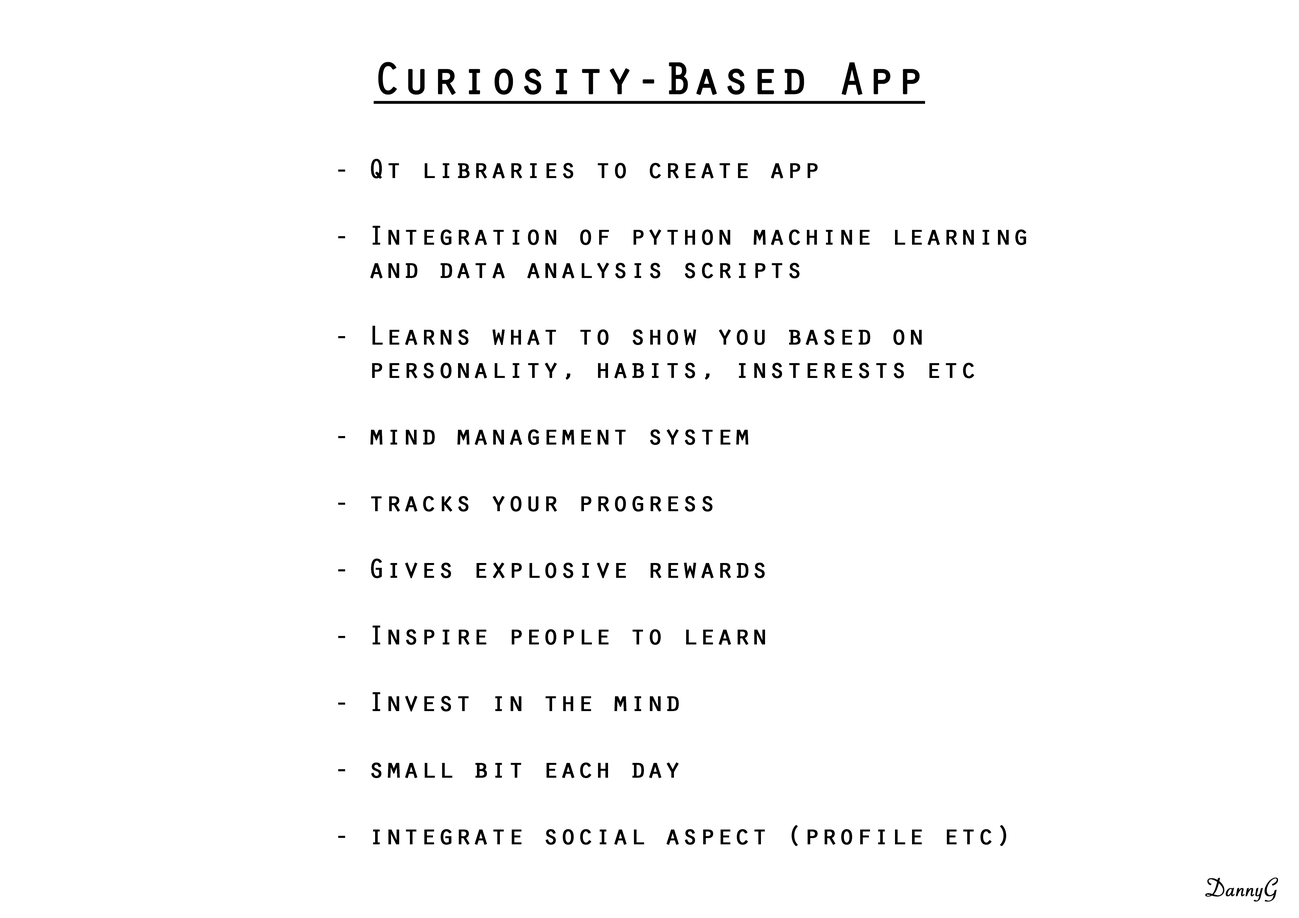
<style>
.page{position:relative;width:1299px;height:918px;background:#ffffff}
.page>*{position:absolute;margin:0}
.t1{font:46.3px "OratorStd";color:#000000;font-weight:bold;text-decoration:underline}
.t2{font:27.8px "OratorStd";color:#000000;font-weight:bold}
.t3{font:27.8px "SavoyeLetPlain";color:#000000;font-weight:bold}
</style>
<div class="page">
<p class="t1" style="left:374px;top:62px;width:551px;height:42px">Curiosity-Based App</p>
<p class="t2" style="left:338px;top:159px;width:688px;height:687px">- Qt libraries to create app<br><br>- Integration of python machine learning <br>  and data analysis scripts<br><br>- Learns what to show you based on <br>  personality, habits, insterests etc<br><br>- mind management system<br><br>- tracks your progress<br><br>- Gives explosive rewards<br><br>- Inspire people to learn<br><br>- Invest in the mind<br><br>- small bit each day<br><br>- integrate social aspect (profile etc)</p>
<p class="t3" style="left:1205px;top:877px;width:73px;height:25px">DannyG</p>
</div>
